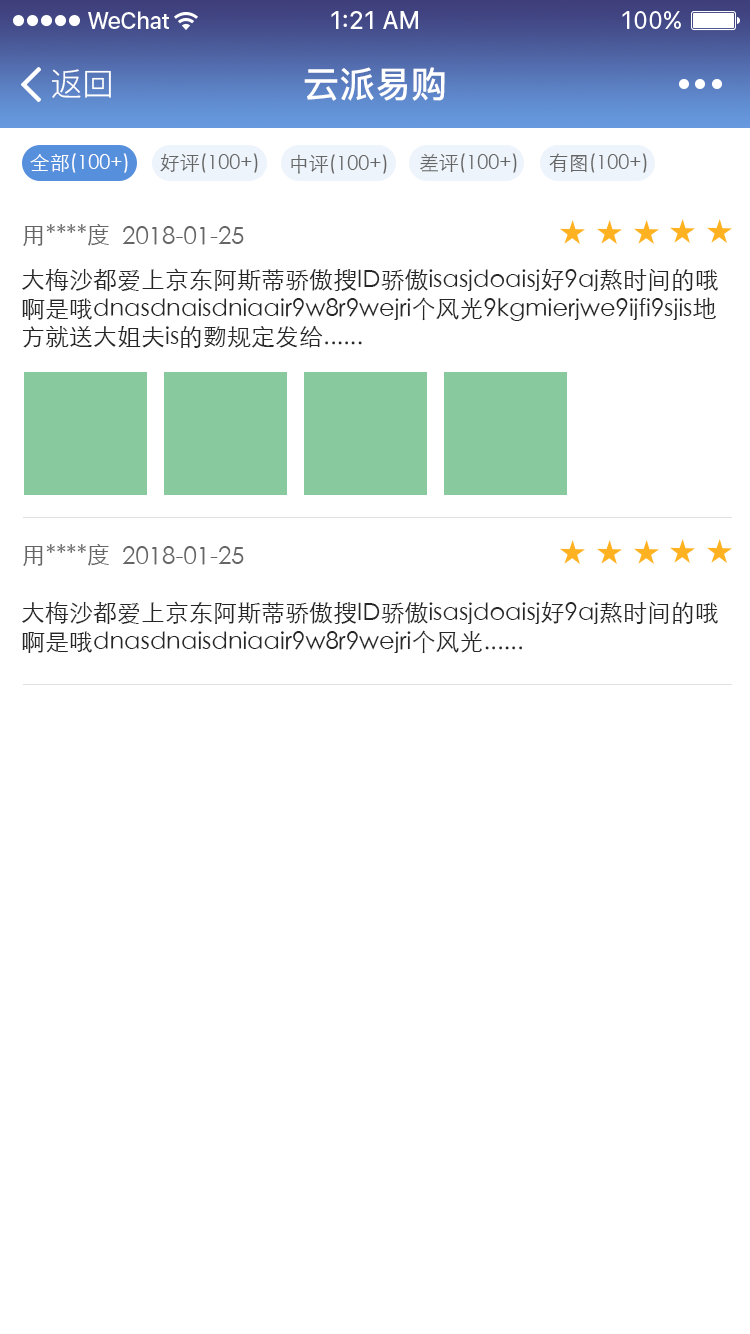
<style>
.page{position:relative;width:750px;height:1334px;background:#ffffff}
.page>*{position:absolute;margin:0}
.t1{font:32px "PingFang-SC-Regular";color:#ffffff}
.t2{font:36px "PingFang-SC-Bold";color:#ffffff}
.t3{font:20px "STXihei";color:#ffffff}
.t4{font:20px "STXihei";color:#666666}
.t5{font:24px "STXihei";color:#666666}
.t6{font:24px "STXihei";color:#262626}
</style>
<div class="page">
<p class="t1" style="left:52px;top:69px;width:59px;height:29px">返回</p>
<p class="t2" style="left:304px;top:67px;width:141px;height:34px">云派易购</p>
<p class="t3" style="left:30px;top:153px;width:98px;height:20px">全部(100+)</p>
<p class="t4" style="left:160px;top:153px;width:98px;height:20px">好评(100+)</p>
<p class="t4" style="left:291px;top:154px;width:96px;height:20px">中评(100+)</p>
<p class="t4" style="left:420px;top:153px;width:97px;height:20px">差评(100+)</p>
<p class="t4" style="left:549px;top:153px;width:98px;height:20px">有图(100+)</p>
<p class="t5" style="left:23px;top:224px;width:86px;height:22px">用****度</p>
<p class="t5" style="left:122px;top:226px;width:122px;height:19px">2018-01-25</p>
<p class="t6" style="left:22px;top:268px;width:696px;height:80px">大梅沙都爱上京东阿斯蒂骄傲搜ID骄傲isasjdoaisj好9aj熬时间的哦啊是哦dnasdnaisdniaair9w8r9wejri个风光9kgmierjwe9ijfi9sjis地方就送大姐夫is的覅规定发给......</p>
<p class="t5" style="left:23px;top:544px;width:86px;height:22px">用****度</p>
<p class="t5" style="left:122px;top:546px;width:122px;height:19px">2018-01-25</p>
<p class="t6" style="left:22px;top:601px;width:696px;height:53px">大梅沙都爱上京东阿斯蒂骄傲搜ID骄傲isasjdoaisj好9aj熬时间的哦啊是哦dnasdnaisdniaair9w8r9wejri个风光......</p>
</div>
